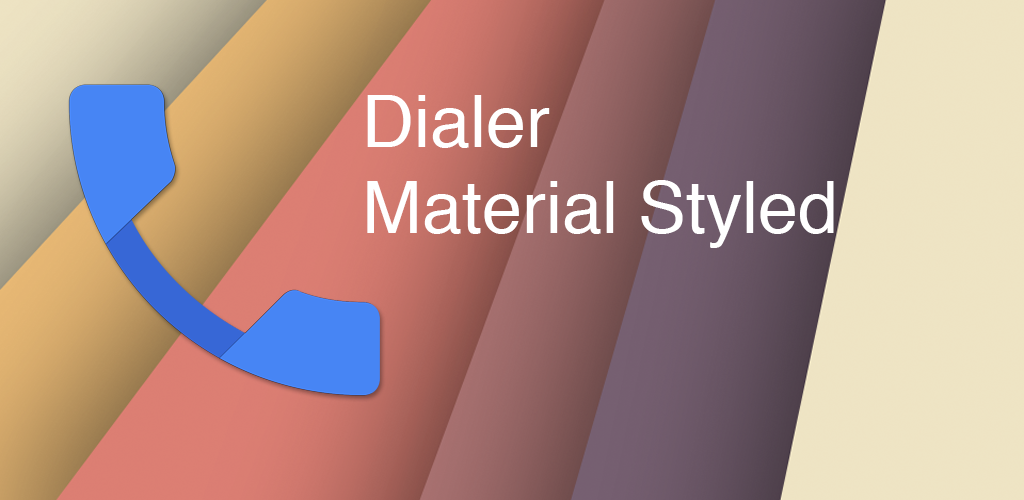
<style>
.page{position:relative;width:1024px;height:500px}
.page>*{position:absolute;margin:0}
.t1{font:72px "Helvetica";color:#ffffff}
</style>
<div class="page">
<p class="t1" style="left:367px;top:95px;width:467px;height:153px">Dialer <br>Material Styled</p>
</div>
